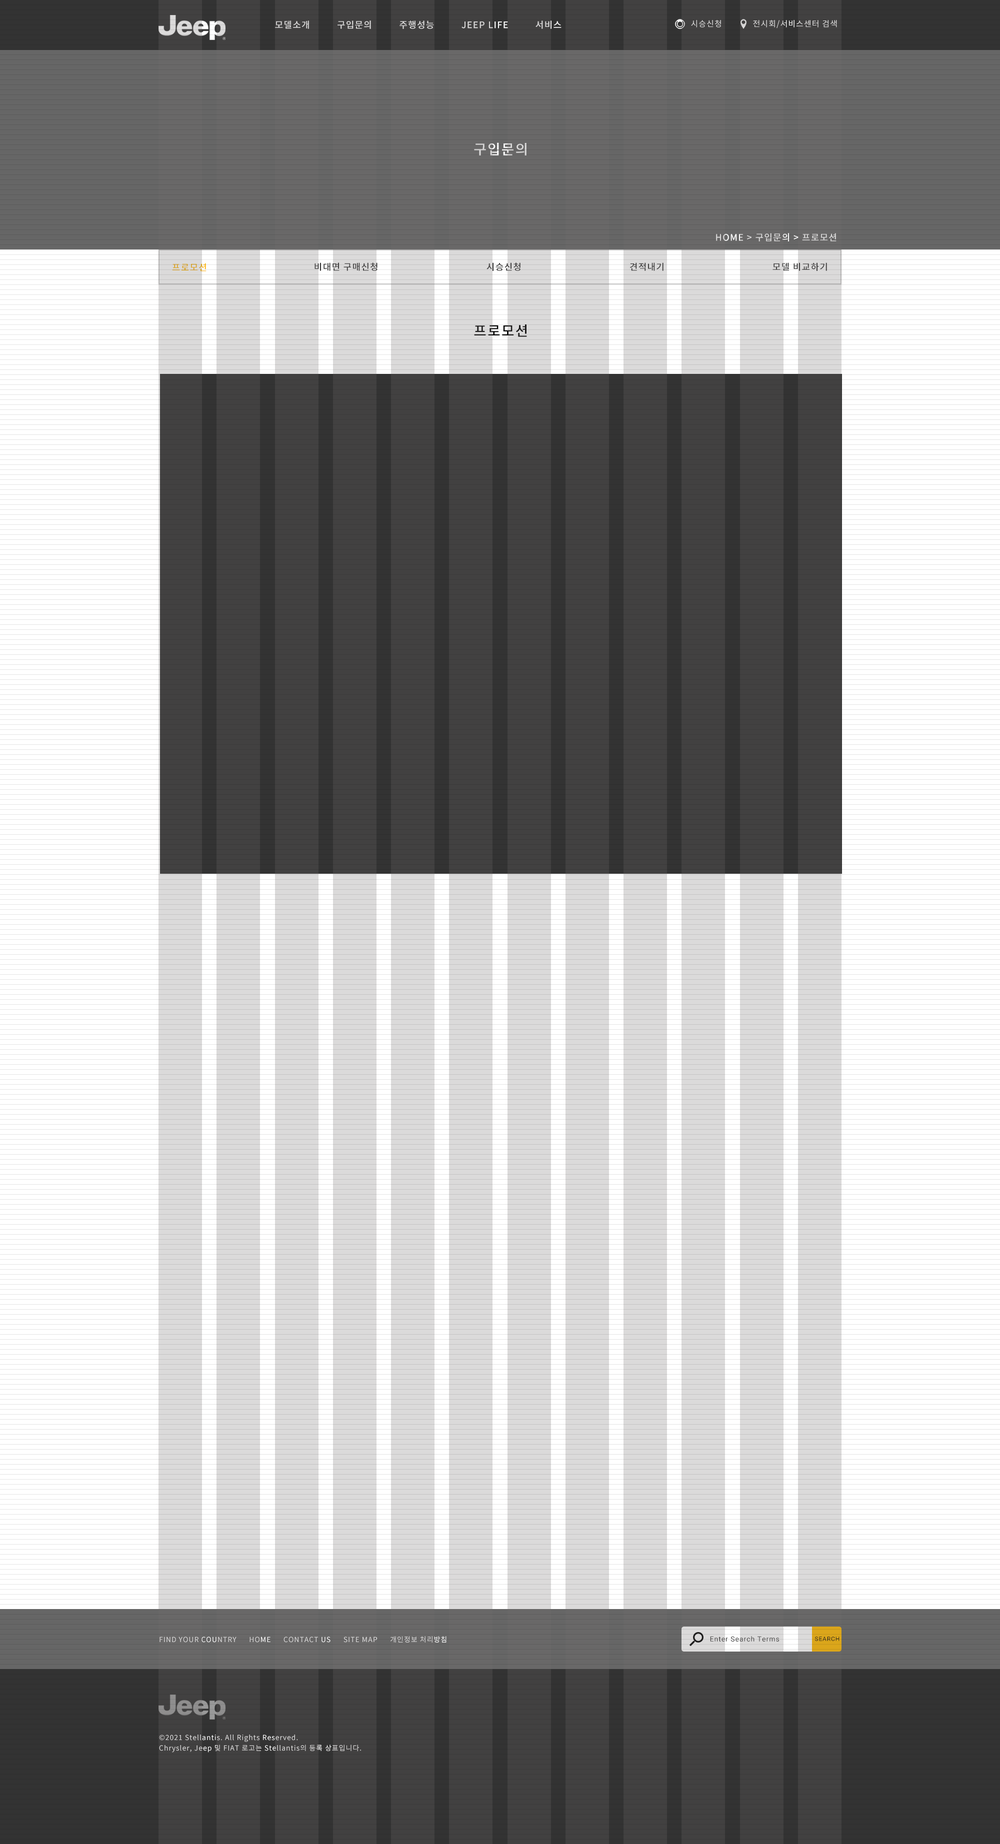
<style>
.page{position:relative;width:1000px;height:1844px}
.page>*{position:absolute;margin:0}
.t1{font:9px "NotoSansKR-Medium";letter-spacing:0.07em;color:#dbdada}
.t2{font:8px "NotoSansKR-Regular";letter-spacing:0.07em;color:#dbdada}
.t3{font:14px "NotoSansKR-Medium";letter-spacing:0.07em}
.t4{font:9px "NotoSansKR-Medium";letter-spacing:0.07em}
.t5{font:9px "NotoSansKR-Medium";letter-spacing:0.07em;color:#dba61b}
.t6{font:9px "NotoSansKR-Medium";letter-spacing:0.07em;color:#333333}
.t7{font:14px "NotoSansKR-Medium";letter-spacing:0.07em;color:#1c1b1b}
.t8{font:7px "NotoSansKR-Regular";letter-spacing:0.07em;color:#dbdada}
.t9{font:7px "Roboto-Regular";letter-spacing:0.07em;color:#333333}
.t10{font:7px "Roboto-Regular";letter-spacing:0.07em;color:#333333;text-transform:uppercase}
.t11{font:6px "Roboto-Regular";letter-spacing:0.07em;color:#1c1b1b;text-transform:uppercase}
.t12{font:7px "NotoSansKR-Regular";letter-spacing:0.07em}
</style>
<div class="page">
<p class="t1" style="left:275px;top:20px;width:287px;height:9px">모델소개          구입문의          주행성능          JEEP LIFE          서비스</p>
<p class="t2" style="left:691px;top:20px;width:30px;height:8px">시승신청</p>
<p class="t2" style="left:753px;top:20px;width:84px;height:8px">전시회/서비스센터 검색</p>
<p class="t3" style="left:474px;top:142px;width:52px;height:14px">구입문의</p>
<p class="t4" style="left:716px;top:233px;width:120px;height:9px">HOME &gt; 구입문의 &gt; 프로모션</p>
<p class="t5" style="left:172px;top:263px;width:34px;height:9px">프로모션</p>
<p class="t6" style="left:314px;top:262px;width:64px;height:9px">비대면 구매신청</p>
<p class="t6" style="left:486px;top:262px;width:34px;height:9px">시승신청</p>
<p class="t6" style="left:630px;top:262px;width:34px;height:9px">견적내기</p>
<p class="t6" style="left:772px;top:262px;width:55px;height:9px">모델 비교하기</p>
<p class="t7" style="left:474px;top:324px;width:53px;height:13px">프로모션</p>
<p class="t8" style="left:160px;top:1636px;width:286px;height:7px">FIND YOUR COUNTRY      HOME      CONTACT US      SITE MAP      개인정보 처리방침</p>
<p class="t9" style="left:710px;top:1636px;width:69px;height:6px"><span class="t10">e</span>nter Search Terms</p>
<p class="t11" style="left:815px;top:1637px;width:25px;height:5px">Search</p>
<p class="t12" style="left:159px;top:1735px;width:202px;height:18px">©2021 Stellantis. All Rights Reserved.<br>Chrysler, Jeep 및 FIAT 로고는 Stellantis의 등록 상표입니다.</p>
</div>
